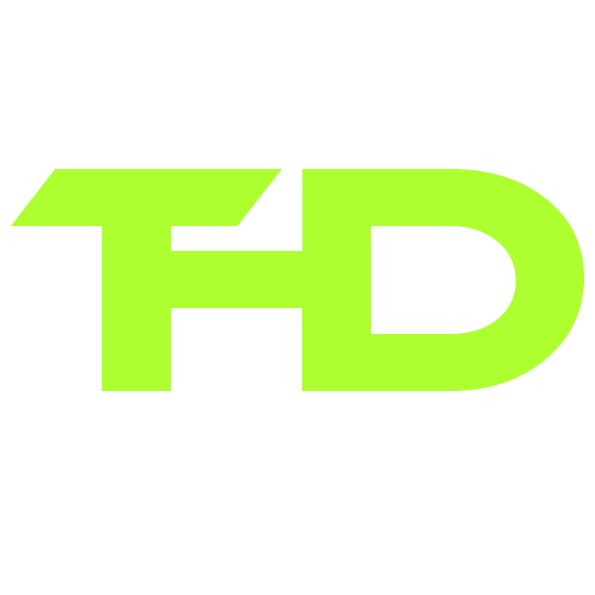
<style>
.page{position:relative;width:595px;height:595px;background:#ffffff}
.page>*{position:absolute;margin:0}
.t1{font:307.2px "Ethnocentric";letter-spacing:0.01em;color:#adff2f}
</style>
<div class="page">
<p class="t1" style="left:10px;top:169px;width:272px;height:222px">T</p>
<p class="t1" style="left:101px;top:169px;width:270px;height:222px">H</p>
<p class="t1" style="left:302px;top:169px;width:283px;height:222px">D</p>
</div>
